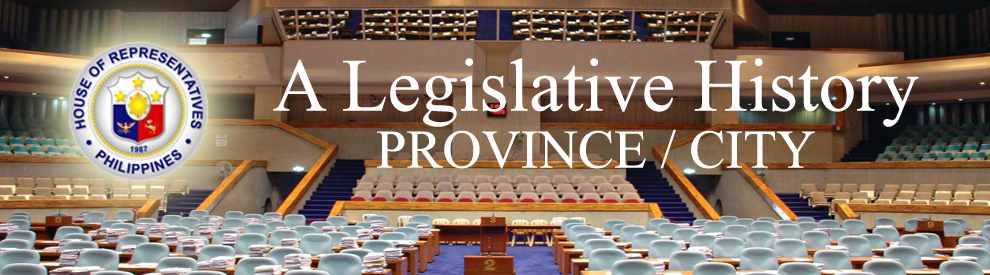
<style>
.page{position:relative;width:990px;height:275px}
.page>*{position:absolute;margin:0}
.t1{font:75px "TimesNewRomanPSMT";color:#fdfdfd}
.t2{font:62.5px "TimesNewRomanPSMT";color:#fdfdfd}
.t3{font:54.2px "TimesNewRomanPSMT";color:#fdfdfd}
</style>
<div class="page">
<p class="t1" style="left:273px;top:58px;width:646px;height:69px"><span class="t2"><br></span>A Legislative History</p>
<p class="t3" style="left:377px;top:129px;width:438px;height:40px">PROVINCE / CITY</p>
</div>
